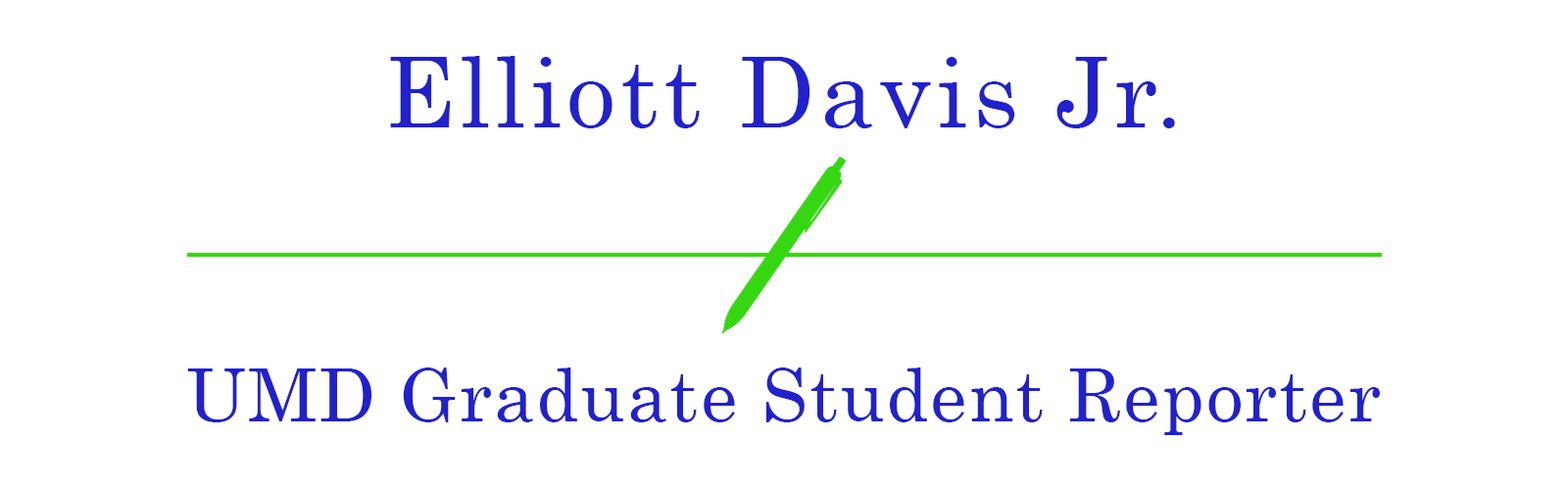
<style>
.page{position:relative;width:1568px;height:490px;background:#ffffff}
.page>*{position:absolute;margin:0}
.t1{font:73.5px "Century";letter-spacing:0.025em;color:#2121ce}
.t2{font:98px "Century";letter-spacing:0.05em;color:#2121ce}
</style>
<div class="page">
<p class="t1" style="left:188px;top:56px;width:1192px;height:379px;text-align:center"><span class="t2">Elliott Davis Jr.<br><br></span><br>UMD Graduate Student Reporter</p>
</div>
